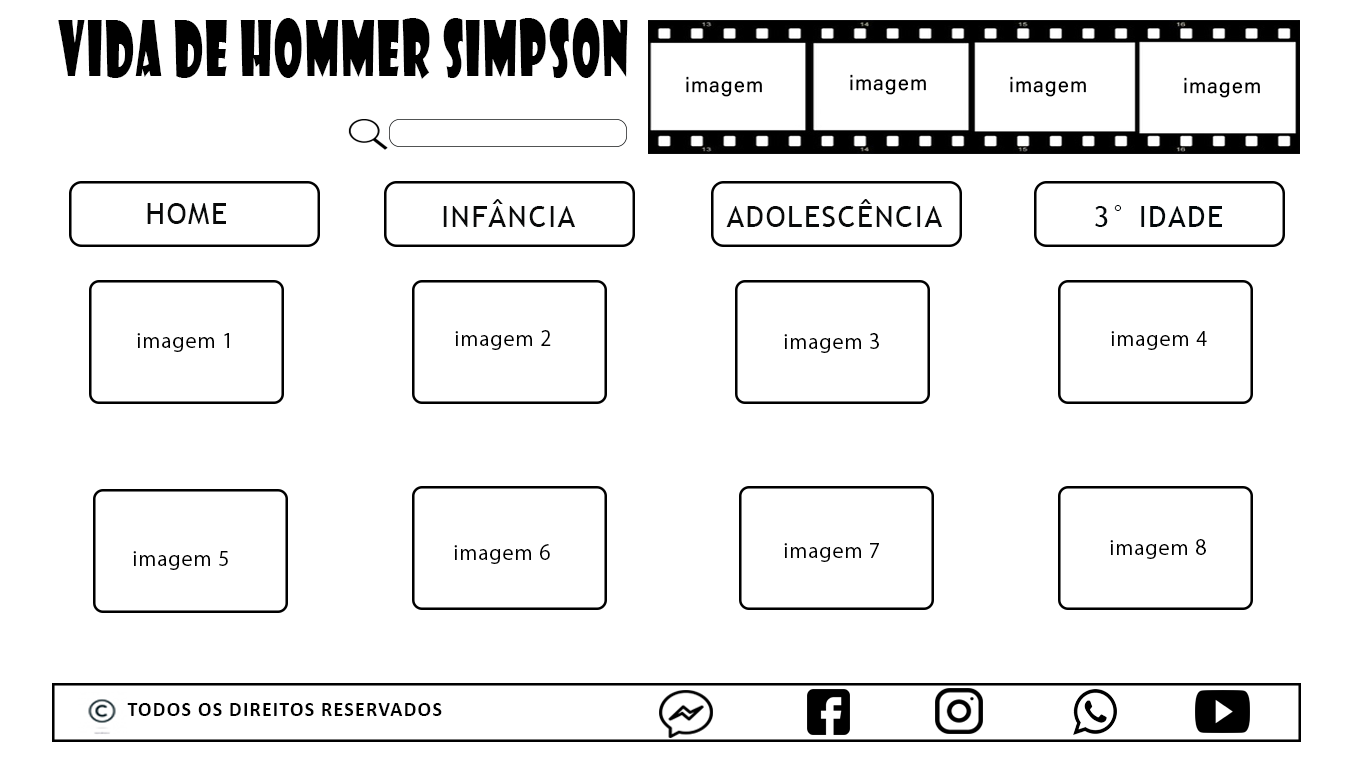
<style>
.page{position:relative;width:1366px;height:768px;background:#ffffff}
.page>*{position:absolute;margin:0}
.t1{font:73.5px "ShowcardGothic-Reg";letter-spacing:0.05em;color:#000000;scale:0.56 1}
.t2{font:20.4px "AcuminConcept-Regular";letter-spacing:0.05em;color:#000000}
.t3{font:30px "TrebuchetMS";letter-spacing:0.05em;color:#090a0a}
.t4{font:30px "TrebuchetMS";letter-spacing:0.05em;color:#01070a}
.t5{font:20px "KozGoPr6N-Regular";letter-spacing:0.05em;color:#000000}
.t6{font:20.4px "Calibri-Bold";letter-spacing:0.05em;color:#000000}
</style>
<div class="page">
<p class="t1" style="left:58px;top:18px;width:570px;height:61px">VIDA DE HOMMER SIMPSON</p>
<p class="t2" style="left:686px;top:76px;width:76px;height:21px">imagem</p>
<p class="t2" style="left:850px;top:74px;width:76px;height:21px">imagem</p>
<p class="t2" style="left:1010px;top:76px;width:76px;height:21px">imagem</p>
<p class="t2" style="left:1184px;top:77px;width:76px;height:21px">imagem</p>
<p class="t3" style="left:147px;top:203px;width:79px;height:21px">HOME</p>
<p class="t3" style="left:443px;top:199px;width:132px;height:28px">INFÂNCIA</p>
<p class="t3" style="left:726px;top:199px;width:216px;height:28px">ADOLESCÊNCIA</p>
<p class="t4" style="left:1095px;top:205px;width:127px;height:22px">3° IDADE</p>
<p class="t5" style="left:137px;top:333px;width:92px;height:19px">imagem 1</p>
<p class="t5" style="left:455px;top:330px;width:96px;height:20px">imagem 2</p>
<p class="t5" style="left:784px;top:333px;width:95px;height:20px">imagem 3</p>
<p class="t5" style="left:1111px;top:331px;width:96px;height:19px">imagem 4</p>
<p class="t5" style="left:454px;top:544px;width:96px;height:20px">imagem 6</p>
<p class="t5" style="left:784px;top:543px;width:95px;height:19px">imagem 7</p>
<p class="t5" style="left:1110px;top:539px;width:96px;height:20px">imagem 8</p>
<p class="t5" style="left:133px;top:551px;width:95px;height:19px">imagem 5</p>
<p class="t6" style="left:127px;top:703px;width:315px;height:13px">TODOS OS DIREITOS RESERVADOS</p>
</div>
